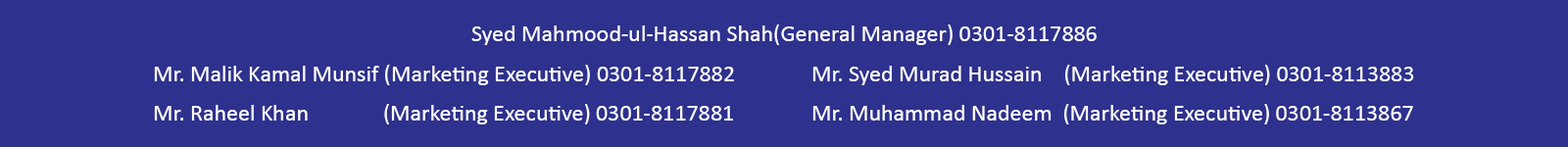
<style>
.page{position:relative;width:1568px;height:147px;background:#2e318d}
.page>*{position:absolute;margin:0}
.t1{font:23.5px "Calibri";color:#ffffff}
</style>
<div class="page">
<p class="t1" style="left:471px;top:24px;width:626px;height:21px">Syed Mahmood-ul-Hassan Shah(General Manager) 0301-8117886</p>
<p class="t1" style="left:154px;top:65px;width:580px;height:20px">Mr. Malik Kamal Munsif (Marketing Executive) 0301-8117882</p>
<p class="t1" style="left:812px;top:65px;width:602px;height:20px">Mr. Syed Murad Hussain    (Marketing Executive) 0301-8113883</p>
<p class="t1" style="left:154px;top:104px;width:579px;height:20px">Mr. Raheel Khan              (Marketing Executive) 0301-8117881</p>
<p class="t1" style="left:812px;top:104px;width:601px;height:20px">Mr. Muhammad Nadeem  (Marketing Executive) 0301-8113867</p>
</div>
